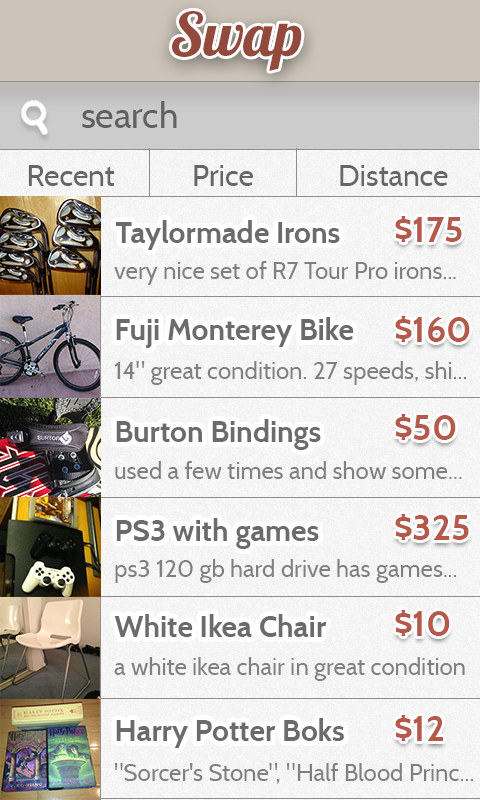
<style>
.page{position:relative;width:480px;height:800px}
.page>*{position:absolute;margin:0}
.t1{font:60px "Lobster1.4";color:#94493d}
.t2{font:36px "Cabin-Regular";color:#606060}
.t3{font:30px "Cabin-Regular";color:#666666}
.t4{font:30px "Cabin-Bold";color:#6b6b6b}
.t5{font:36px "Cabin-Bold";color:#b5594b}
.t6{font:24px "Cabin-Regular";color:#808080}
</style>
<div class="page">
<p class="t1" style="left:172px;top:11px;width:130px;height:60px">Swap</p>
<p class="t2" style="left:82px;top:101px;width:95px;height:27px">search</p>
<p class="t3" style="left:28px;top:165px;width:87px;height:21px">Recent</p>
<p class="t3" style="left:194px;top:165px;width:59px;height:21px">Price</p>
<p class="t3" style="left:340px;top:165px;width:108px;height:21px">Distance</p>
<p class="t4" style="left:116px;top:220px;width:224px;height:30px">Taylormade Irons</p>
<p class="t5" style="left:395px;top:216px;width:67px;height:26px">$175</p>
<p class="t6" style="left:114px;top:261px;width:342px;height:24px">very nice set of R7 Tour Pro irons...</p>
<p class="t4" style="left:116px;top:317px;width:238px;height:31px">Fuji Monterey Bike</p>
<p class="t5" style="left:395px;top:316px;width:75px;height:26px">$160</p>
<p class="t6" style="left:114px;top:361px;width:352px;height:24px">14" great condition. 27 speeds, shi...</p>
<p class="t5" style="left:395px;top:414px;width:61px;height:26px">$50</p>
<p class="t4" style="left:116px;top:419px;width:205px;height:31px">Burton Bindings</p>
<p class="t6" style="left:115px;top:461px;width:347px;height:18px">used a few times and show some...</p>
<p class="t4" style="left:116px;top:518px;width:203px;height:31px">PS3 with games</p>
<p class="t5" style="left:395px;top:514px;width:74px;height:26px">$325</p>
<p class="t6" style="left:115px;top:559px;width:341px;height:24px">ps3 120 gb hard drive has games...</p>
<p class="t4" style="left:114px;top:614px;width:213px;height:23px">White Ikea Chair</p>
<p class="t5" style="left:395px;top:610px;width:55px;height:26px">$10</p>
<p class="t6" style="left:114px;top:657px;width:351px;height:24px">a white ikea chair in great condition</p>
<p class="t4" style="left:116px;top:718px;width:228px;height:30px">Harry Potter Boks</p>
<p class="t5" style="left:395px;top:715px;width:49px;height:26px">$12</p>
<p class="t6" style="left:115px;top:763px;width:358px;height:21px">"Sorcer's Stone", "Half Blood Princ...</p>
</div>
